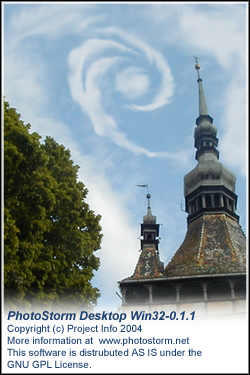
<style>
.page{position:relative;width:250px;height:375px}
.page>*{position:absolute;margin:0}
.t1{font:10px "ArialMT";color:#1e406f}
.t2{font:12px "Arial-BoldItalicMT";color:#1e406f}
</style>
<div class="page">
<p class="t1" style="left:7px;top:311px;width:195px;height:57px"><span class="t2">PhotoStorm Desktop Win32-0.1.1<br></span>Copyright (c) Project Info 2004<br>More information at  www.photostorm.net<br>This software is distrubuted AS IS under the <br>GNU GPL License.</p>
</div>
